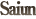
<style>
.page{position:relative;width:36px;height:19px;background:#ffffff}
.page>*{position:absolute;margin:0}
.t1{font:18px "RyuminPro-ExBold";letter-spacing:-0.12em;color:#4a3f32;font-weight:bold;scale:0.9 1}
</style>
<div class="page">
<p class="t1" style="left:0px;top:1px;width:37px;height:15px">Saiun</p>
</div>
